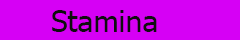
<style>
.page{position:relative;width:240px;height:40px;background:#d600f5}
.page>*{position:absolute;margin:0}
.t1{font:30px "Tahoma";color:#0f0e0e}
</style>
<div class="page">
<p class="t1" style="left:52px;top:10px;width:105px;height:22px">Stamina</p>
</div>
